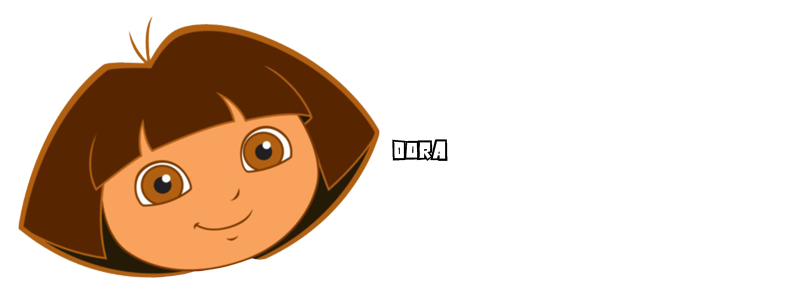
<style>
.page{position:relative;width:800px;height:300px;background:#ffffff}
.page>*{position:absolute;margin:0}
.t1{font:12.3px/24px "Powerful";letter-spacing:0.005em;color:#000000}
</style>
<div class="page">
<p class="t1" style="left:392px;top:139px;width:56px;height:22px;text-align:center">DORA</p>
</div>
